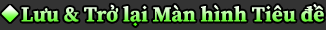
<style>
.page{position:relative;width:326px;height:30px;background:#333333}
.page>*{position:absolute;margin:0}
.t1{font:21px "SourceSerifRoman-Bold";letter-spacing:0.011em}
</style>
<div class="page">
<p class="t1" style="left:21px;top:4px;width:303px;height:22px">Lưu &amp; Trở lại Màn hình Tiêu đề</p>
</div>
